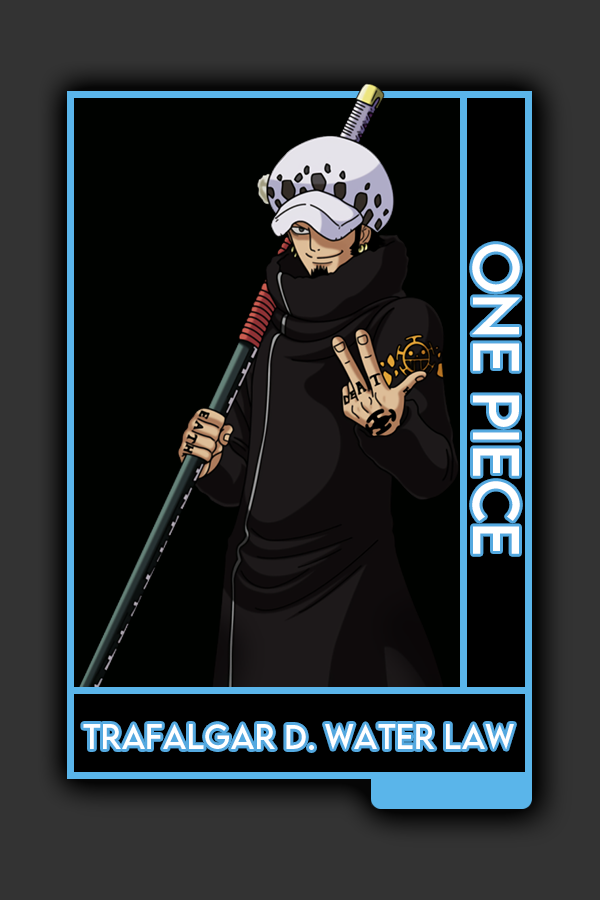
<style>
.page{position:relative;width:600px;height:900px;background:#333333}
.page>*{position:absolute;margin:0}
.t1{font:58.4px "LEMONMILK-Regular";color:#ffffff}
.t2{font:30.8px "LEMONMILK-Regular";color:#ffffff}
</style>
<div class="page">
<p class="t1" style="left:472px;top:244px;width:48px;height:310px;rotate:90deg">One Piece</p>
<p class="t2" style="left:83px;top:724px;width:431px;height:26px">Trafalgar D. Water Law</p>
</div>
